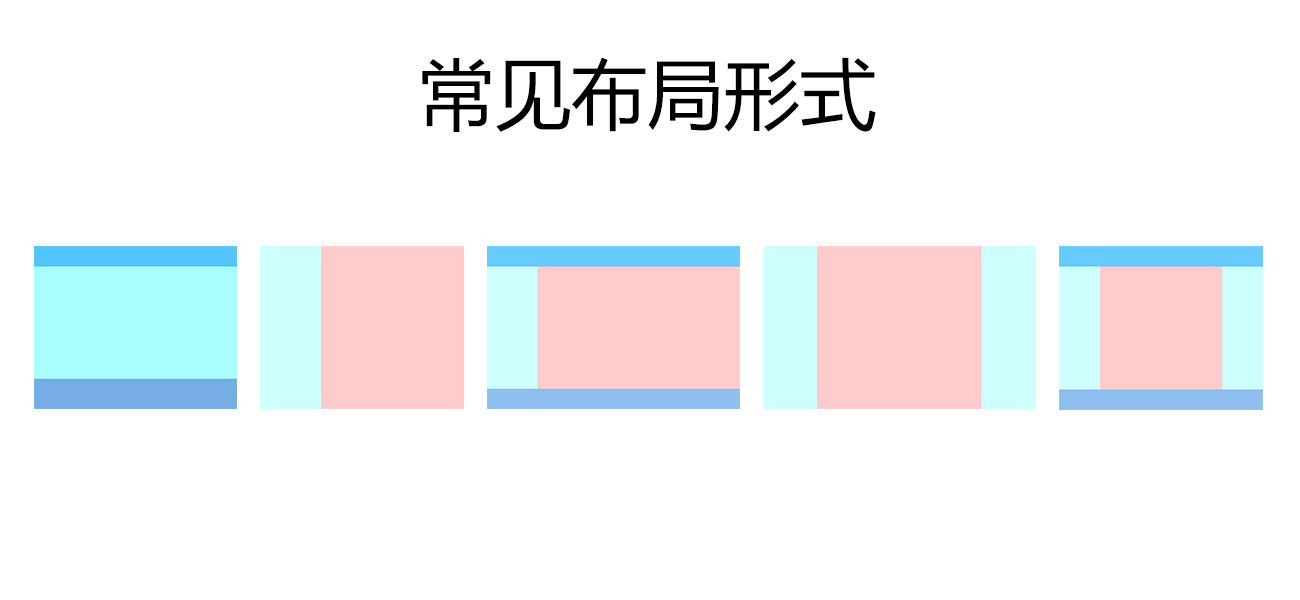
<style>
.page{position:relative;width:1300px;height:600px;background:#ffffff}
.page>*{position:absolute;margin:0}
.t1{font:76.4px "MicrosoftYaHei";color:#000000}
</style>
<div class="page">
<p class="t1" style="left:422px;top:57px;width:454px;height:75px">常见布局形式</p>
</div>
